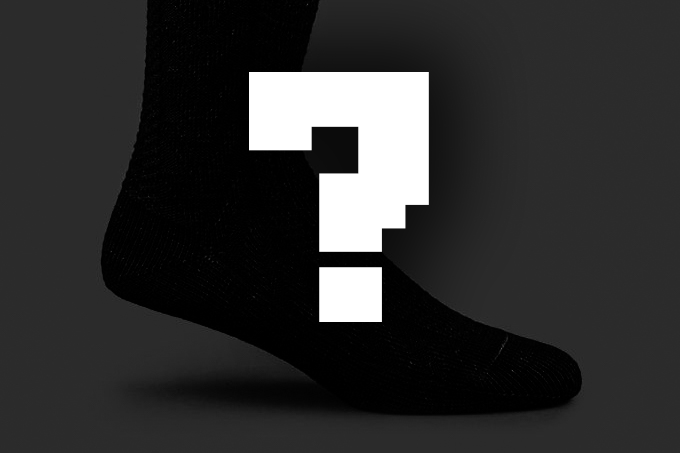
<style>
.page{position:relative;width:680px;height:453px;background:#2b2b2b}
.page>*{position:absolute;margin:0}
.t1{font:250px "MineCrafter-3";color:#ffffff}
</style>
<div class="page">
<p class="t1" style="left:249px;top:72px;width:180px;height:250px">?</p>
</div>
